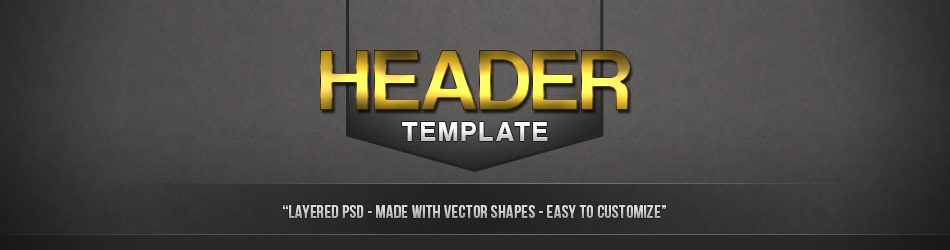
<style>
.page{position:relative;width:950px;height:250px}
.page>*{position:absolute;margin:0}
.t1{font:90.4px "CoolveticaRg-Regular"}
.t2{font:28.3px "CoolveticaRg-Regular";letter-spacing:0.1em}
.t3{font:18px "BebasNeue";letter-spacing:0.02em;color:#d1d1d0}
</style>
<div class="page">
<p class="t1" style="left:320px;top:50px;width:310px;height:60px">HEADER</p>
<p class="t2" style="left:402px;top:122px;width:146px;height:19px">TEMPLATE</p>
<p class="t3" style="left:282px;top:205px;width:385px;height:13px">“Layered PSD - made with vector shapes - easy to customize”</p>
</div>
